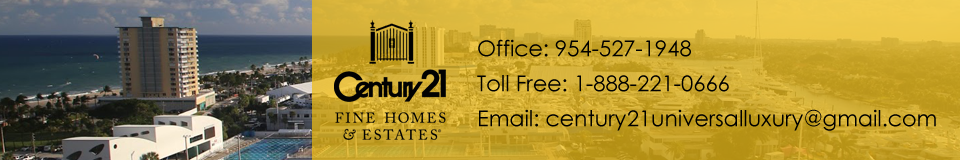
<style>
.page{position:relative;width:960px;height:160px}
.page>*{position:absolute;margin:0}
.t1{font:22px/35px "CenturyGothic";color:#000000}
</style>
<div class="page">
<p class="t1" style="left:477px;top:39px;width:459px;height:92px">Office: 954-527-1948<br>Toll Free: 1-888-221-0666<br>Email: century21universalluxury@gmail.com</p>
</div>
